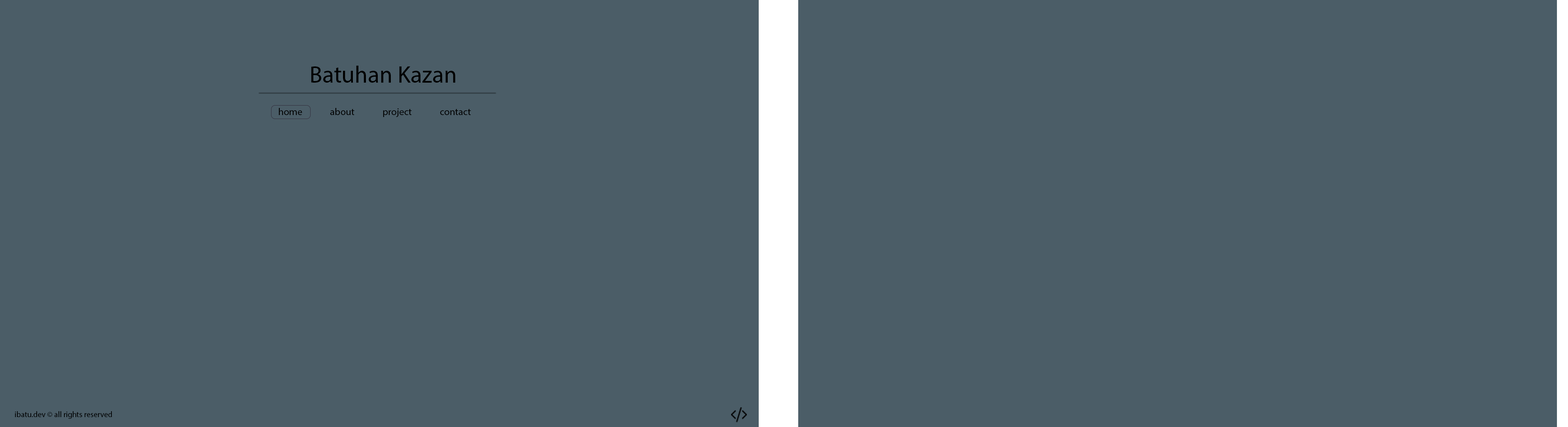
<style>
.page{position:relative;width:1568px;height:427px;background:#4b5d67}
.page>*{position:absolute;margin:0}
.t1{font:23.7px "MyriadPro-Regular";color:#000000}
.t2{font:9.9px "MyriadPro-Regular";color:#000000}
.t3{font:7.9px "MyriadPro-Regular";color:#000000}
</style>
<div class="page">
<p class="t1" style="left:311px;top:66px;width:144px;height:17px">Batuhan Kazan</p>
<p class="t2" style="left:279px;top:108px;width:23px;height:7px">home</p>
<p class="t2" style="left:330px;top:108px;width:24px;height:7px">about</p>
<p class="t2" style="left:383px;top:108px;width:29px;height:9px">project</p>
<p class="t2" style="left:440px;top:109px;width:31px;height:6px">contact</p>
<p class="t3" style="left:15px;top:411px;width:97px;height:7px">ibatu.dev © all rights reserved</p>
</div>
